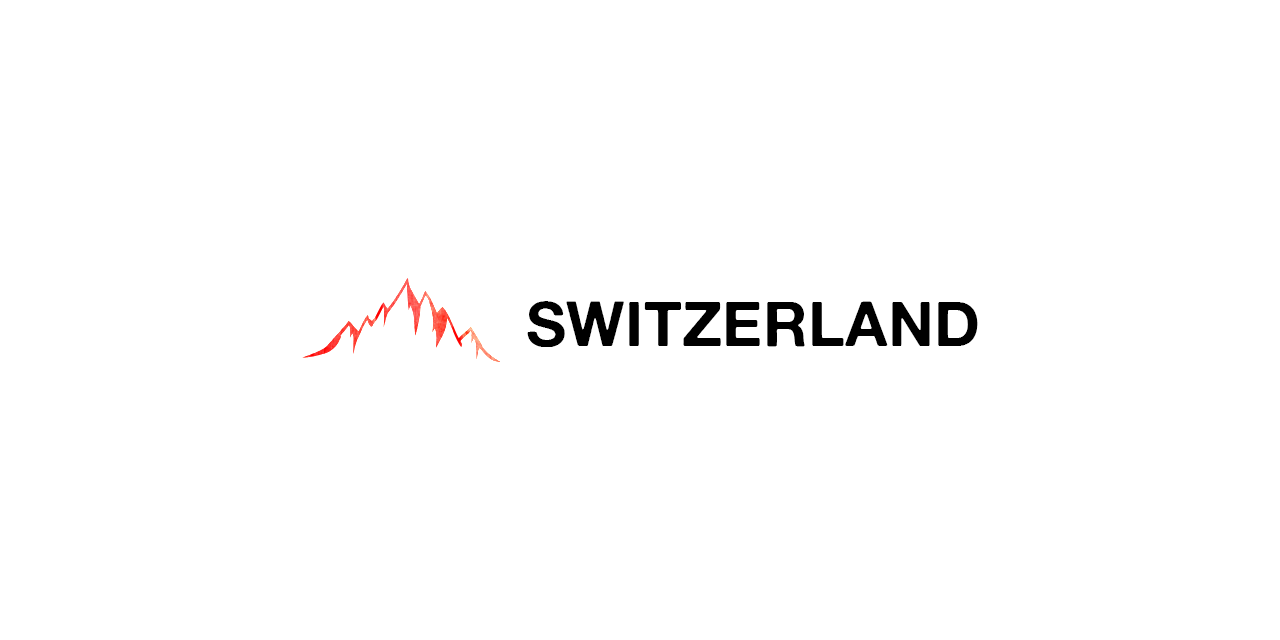
<style>
.page{position:relative;width:1280px;height:640px;background:#ffffff}
.page>*{position:absolute;margin:0}
.t1{font:62.5px "AlteHaasGrotesk_Bold";color:#000000}
</style>
<div class="page">
<p class="t1" style="left:527px;top:301px;width:451px;height:46px">SWITZERLAND</p>
</div>
